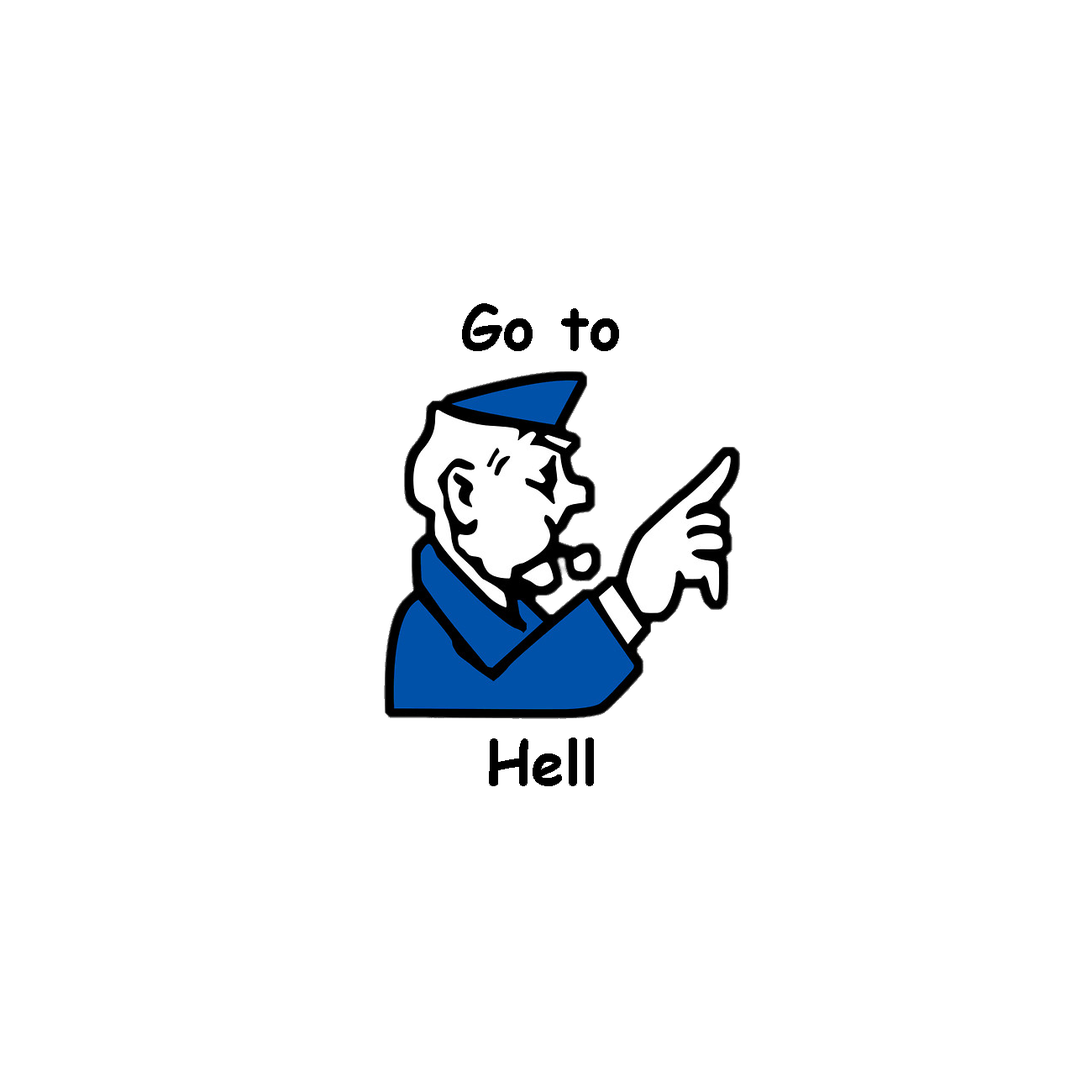
<style>
.page{position:relative;width:1092px;height:1092px;background:#ffffff}
.page>*{position:absolute;margin:0}
.t1{font:60.5px "ComicSansMS-Bold";color:#000000}
</style>
<div class="page">
<p class="t1" style="left:462px;top:303px;width:157px;height:483px;text-align:center">Go to<br><br><br><br><br><br>Hell</p>
</div>
